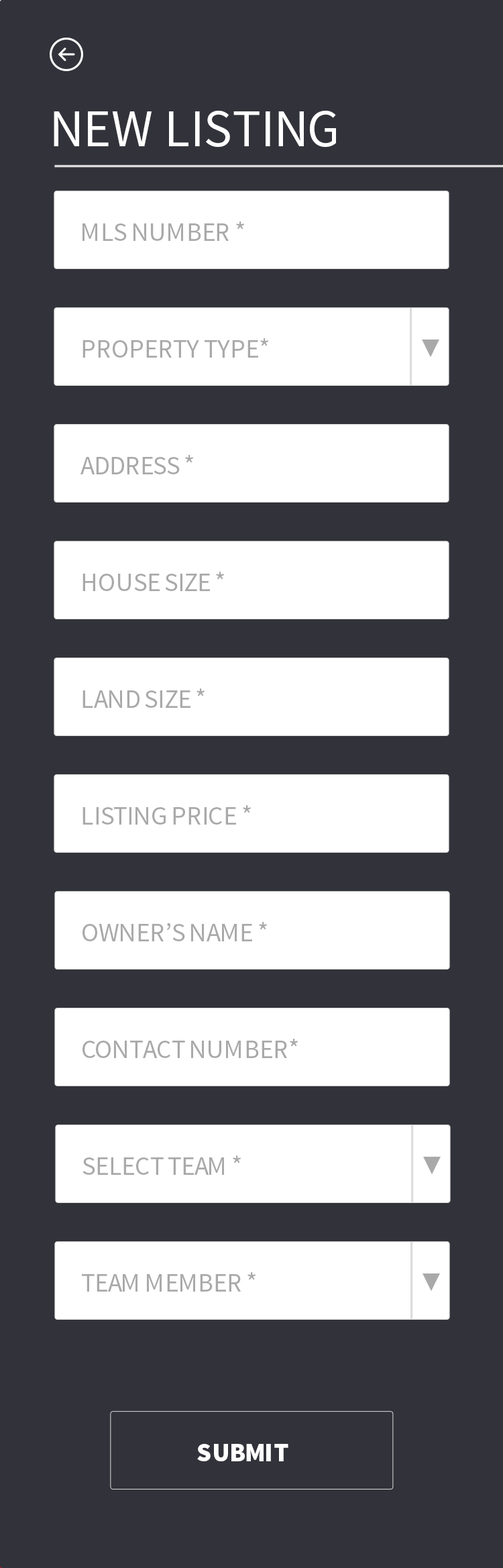
<style>
.page{position:relative;width:503px;height:1568px;background:#32323a}
.page>*{position:absolute;margin:0}
.t1{font:52.8px "SourceSansPro-Regular";color:#ffffff}
.t2{font:26.4px "SourceSansPro-Regular";color:#a9a9a9}
.t3{font:21.6px "AdobeHeitiStd-Regular";color:#a9a9a9}
.t4{font:26.4px "SourceSansPro-Black";color:#ffffff}
</style>
<div class="page">
<p class="t1" style="left:54px;top:111px;width:282px;height:36px">NEW LISTING</p>
<p class="t2" style="left:83px;top:221px;width:161px;height:20px">MLS NUMBER *</p>
<p class="t2" style="left:83px;top:338px;width:185px;height:20px">PROPERTY TYPE*</p>
<p class="t3" style="left:422px;top:339px;width:17px;height:19px">▼</p>
<p class="t2" style="left:81px;top:455px;width:112px;height:19px">ADDRESS *</p>
<p class="t2" style="left:83px;top:572px;width:141px;height:19px">HOUSE SIZE *</p>
<p class="t2" style="left:83px;top:688px;width:122px;height:20px">LAND SIZE *</p>
<p class="t2" style="left:83px;top:805px;width:168px;height:20px">LISTING PRICE *</p>
<p class="t2" style="left:83px;top:922px;width:184px;height:19px">OWNER’S NAME *</p>
<p class="t2" style="left:83px;top:1039px;width:215px;height:19px">CONTACT NUMBER*</p>
<p class="t2" style="left:83px;top:1155px;width:158px;height:20px">SELECT TEAM *</p>
<p class="t3" style="left:423px;top:1157px;width:18px;height:18px">▼</p>
<p class="t2" style="left:82px;top:1272px;width:174px;height:20px">TEAM MEMBER *</p>
<p class="t3" style="left:423px;top:1273px;width:17px;height:19px">▼</p>
<p class="t4" style="left:197px;top:1444px;width:92px;height:17px">SUBMIT</p>
</div>
